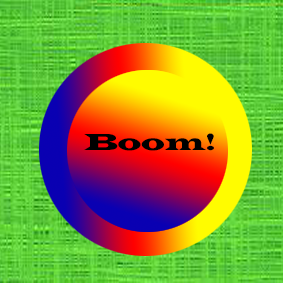
<style>
.page{position:relative;width:283px;height:283px}
.page>*{position:absolute;margin:0}
.t1{font:24px "LatinWide";color:#000000}
</style>
<div class="page">
<p class="t1" style="left:84px;top:133px;width:130px;height:18px">Boom!</p>
</div>
